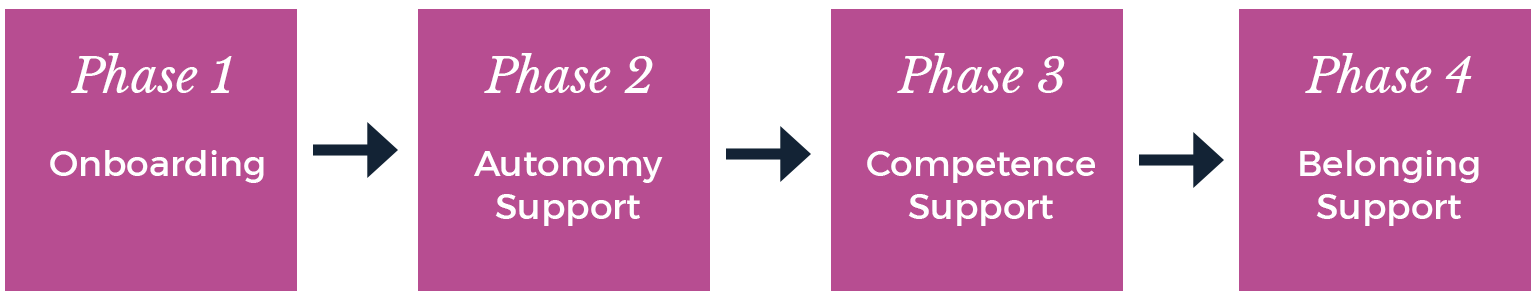
<style>
.page{position:relative;width:1536px;height:294px;background:#b74d91}
.page>*{position:absolute;margin:0}
.t1{font:48px "LibreBaskerville-Italic";color:#ffffff}
.t2{font:36px "Montserrat-Regular";color:#ffffff}
</style>
<div class="page">
<p class="t1" style="left:71px;top:53px;width:161px;height:40px">Phase 1</p>
<p class="t1" style="left:484px;top:53px;width:169px;height:40px">Phase 2</p>
<p class="t1" style="left:897px;top:53px;width:168px;height:40px">Phase 3</p>
<p class="t1" style="left:1305px;top:53px;width:167px;height:40px">Phase 4</p>
<p class="t2" style="left:50px;top:150px;width:214px;height:33px">Onboarding</p>
<p class="t2" style="left:1300px;top:150px;width:179px;height:76px;text-align:center">Belonging<br>Support</p>
<p class="t2" style="left:474px;top:151px;width:189px;height:75px;text-align:center">Autonomy<br>Support</p>
<p class="t2" style="left:867px;top:151px;width:228px;height:75px;text-align:center">Competence<br>Support</p>
</div>
